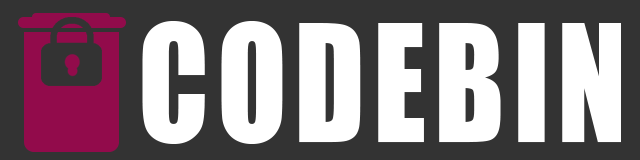
<style>
.page{position:relative;width:640px;height:160px;background:#333333}
.page>*{position:absolute;margin:0}
.t1{font:150.1px "Impact";letter-spacing:0.06em;color:#ffffff;scale:0.85 1}
</style>
<div class="page">
<p class="t1" style="left:142px;top:21px;width:479px;height:123px">CODEBIN</p>
</div>
